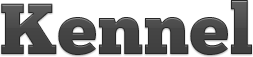
<style>
.page{position:relative;width:253px;height:57px;background:#ffffff}
.page>*{position:absolute;margin:0}
.t1{font:72px "ChunkFive";color:#434343}
</style>
<div class="page">
<p class="t1" style="left:1px;top:0px;width:251px;height:55px">Kennel</p>
</div>
